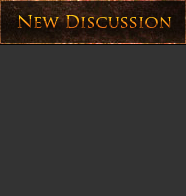
<style>
.page{position:relative;width:186px;height:196px;background:#333333}
.page>*{position:absolute;margin:0}
.t1{font:17px "TrajanPro-Regular"}
</style>
<div class="page">
<p class="t1" style="left:17px;top:15px;width:155px;height:14px">New Discussion</p>
</div>
